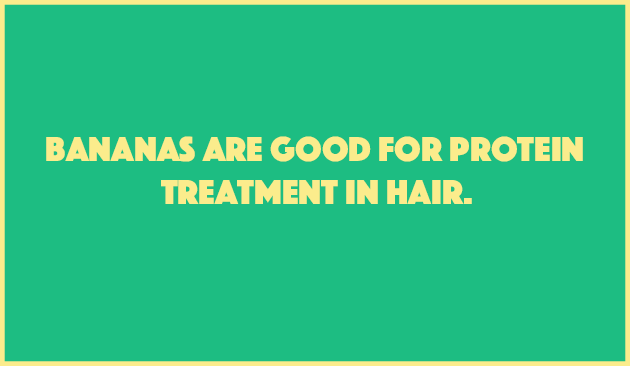
<style>
.page{position:relative;width:630px;height:366px;background:#1dbd82}
.page>*{position:absolute;margin:0}
.t1{font:36px "Phosphate-Solid";color:#fbec8c}
</style>
<div class="page">
<p class="t1" style="left:46px;top:136px;width:537px;height:68px">Bananas are good for protein <br>                treatment in hair.</p>
</div>
